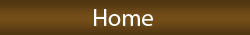
<style>
.page{position:relative;width:250px;height:35px}
.page>*{position:absolute;margin:0}
.t1{font:24px "MyriadPro-Regular";color:#ffffff}
</style>
<div class="page">
<p class="t1" style="left:94px;top:9px;width:59px;height:17px">Home</p>
</div>
